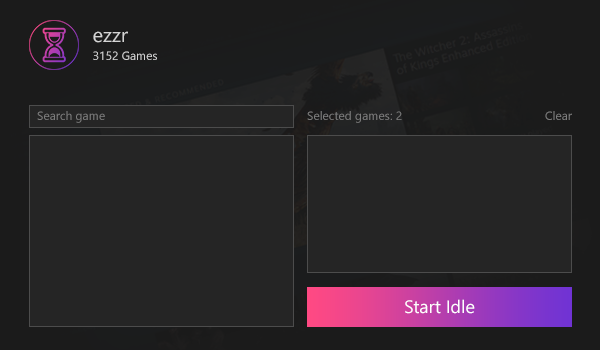
<style>
.page{position:relative;width:600px;height:350px;background:#252525}
.page>*{position:absolute;margin:0}
.t1{font:12px/18px "SegoeUI";color:#d4d4d4}
.t2{font:20px/18px "SegoeUI";color:#d4d4d4}
.t3{font:12px "SegoeUI";color:#7d7d7d}
.t4{font:18px "SegoeUI";color:#ffffff}
</style>
<div class="page">
<p class="t1" style="left:93px;top:31px;width:64px;height:29px"><span class="t2">ezzr<br></span>3152 Games</p>
<p class="t3" style="left:37px;top:111px;width:68px;height:12px">Search game</p>
<p class="t3" style="left:307px;top:111px;width:95px;height:12px">Selected games: 2</p>
<p class="t3" style="left:545px;top:111px;width:27px;height:9px">Clear</p>
<p class="t4" style="left:405px;top:299px;width:70px;height:15px">Start Idle</p>
</div>
